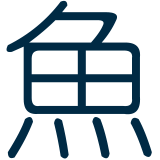
<style>
.page{position:relative;width:160px;height:160px;background:#ffffff}
.page>*{position:absolute;margin:0}
.t1{font:169px "YouYuan";letter-spacing:0.05em;color:#002a44}
</style>
<div class="page">
<p class="t1" style="left:6px;top:0px;width:146px;height:159px">魚</p>
</div>
